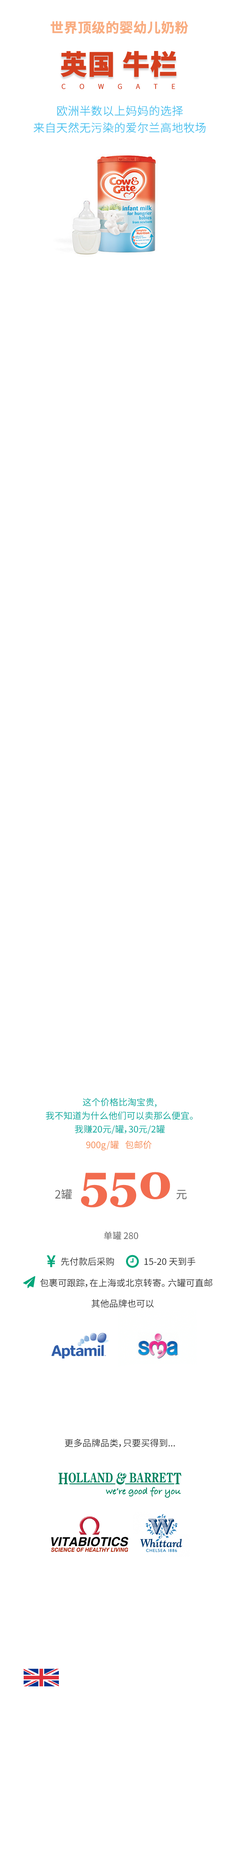
<style>
.page{position:relative;width:240px;height:1875px;background:#ffffff}
.page>*{position:absolute;margin:0}
.t1{font:13.5px "NotoSansHans-Bold";color:#f9ad81;font-weight:bold}
.t2{font:27px "NotoSansHans-Black";color:#d43f1e;font-weight:bold}
.t3{font:6.8px "NotoSansHans-DemiLight";letter-spacing:0.2em;color:#d43f1e;font-weight:bold}
.t4{font:11.2px/16.9px "NotoSansHans-Light";color:#3ebeee;font-weight:bold}
.t5{font:9px/13.5px "NotoSansHans-Regular";color:#00a99d}
.t6{font:9px "NotoSansHans-Regular";color:#f68e56}
.t7{font:9px/13.5px "NotoSansHans-Regular";color:#666666}
.t8{font:11.2px/13.5px "NotoSansHans-Regular";color:#666666}
.t9{font:48.8px/13.5px "Georgia-Bold";color:#f26c4f}
.t10{font:9px "NotoSansHans-Regular";color:#333333}
</style>
<div class="page">
<p class="t1" style="left:51px;top:21px;width:137px;height:13px">世界顶级的婴幼儿奶粉</p>
<p class="t2" style="left:60px;top:51px;width:117px;height:26px">英国 牛栏</p>
<p class="t3" style="left:62px;top:84px;width:113px;height:5px">C    O    W    G    A    T    E</p>
<p class="t4" style="left:33px;top:105px;width:173px;height:28px;text-align:center">欧洲半数以上妈妈的选择<br>来自天然无污染的爱尔兰高地牧场</p>
<p class="t5" style="left:46px;top:1098px;width:147px;height:36px;text-align:center">这个价格比淘宝贵,<br>我不知道为什么他们可以卖那么便宜。<br>我赚20元/罐，30元/2罐</p>
<p class="t6" style="left:86px;top:1140px;width:66px;height:10px">900g/罐   包邮价</p>
<p class="t7" style="left:55px;top:1172px;width:132px;height:68px;text-align:center"><span class="t8">2罐   </span><span class="t9">550 </span><span class="t8">元<br></span><br><br>单罐 280</p>
<p class="t10" style="left:61px;top:1257px;width:53px;height:9px">先付款后采购</p>
<p class="t10" style="left:144px;top:1257px;width:51px;height:9px">15-20 天到手</p>
<p class="t10" style="left:40px;top:1278px;width:173px;height:9px">包裹可跟踪，在上海或北京转寄。 六罐可直邮</p>
<p class="t10" style="left:92px;top:1299px;width:62px;height:9px">其他品牌也可以</p>
<p class="t10" style="left:65px;top:1438px;width:110px;height:10px">更多品牌品类，只要买得到...</p>
</div>
